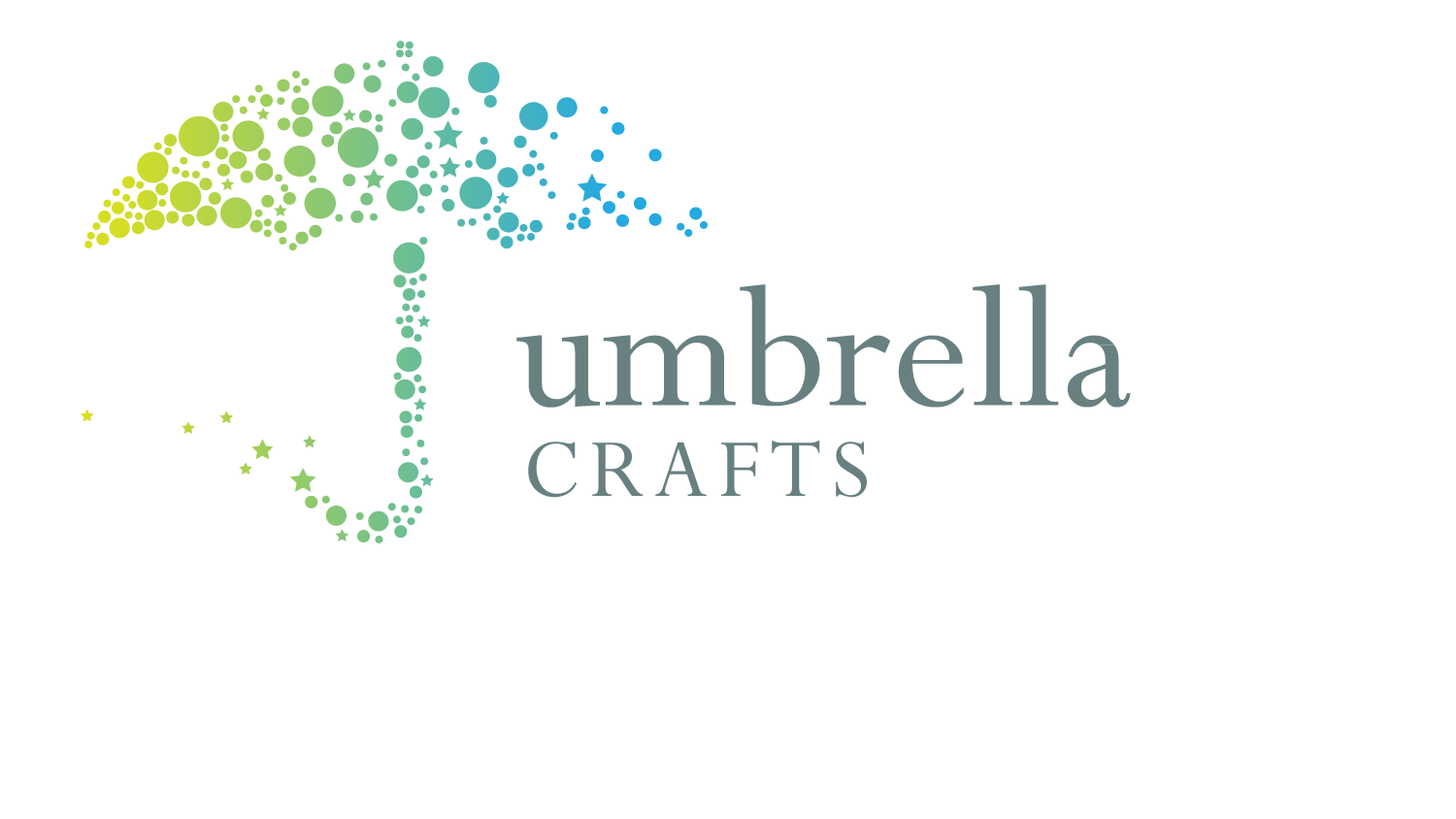
<style>
.page{position:relative;width:1456px;height:819px;background:#ffffff}
.page>*{position:absolute;margin:0}
.t1{font:191.7px "Perpetua";color:#688080}
.t2{font:92.7px "Perpetua";letter-spacing:0.1em;color:#688080}
</style>
<div class="page">
<p class="t1" style="left:516px;top:284px;width:615px;height:124px">umbrella</p>
<p class="t2" style="left:528px;top:441px;width:339px;height:57px">CRAFTS</p>
</div>
